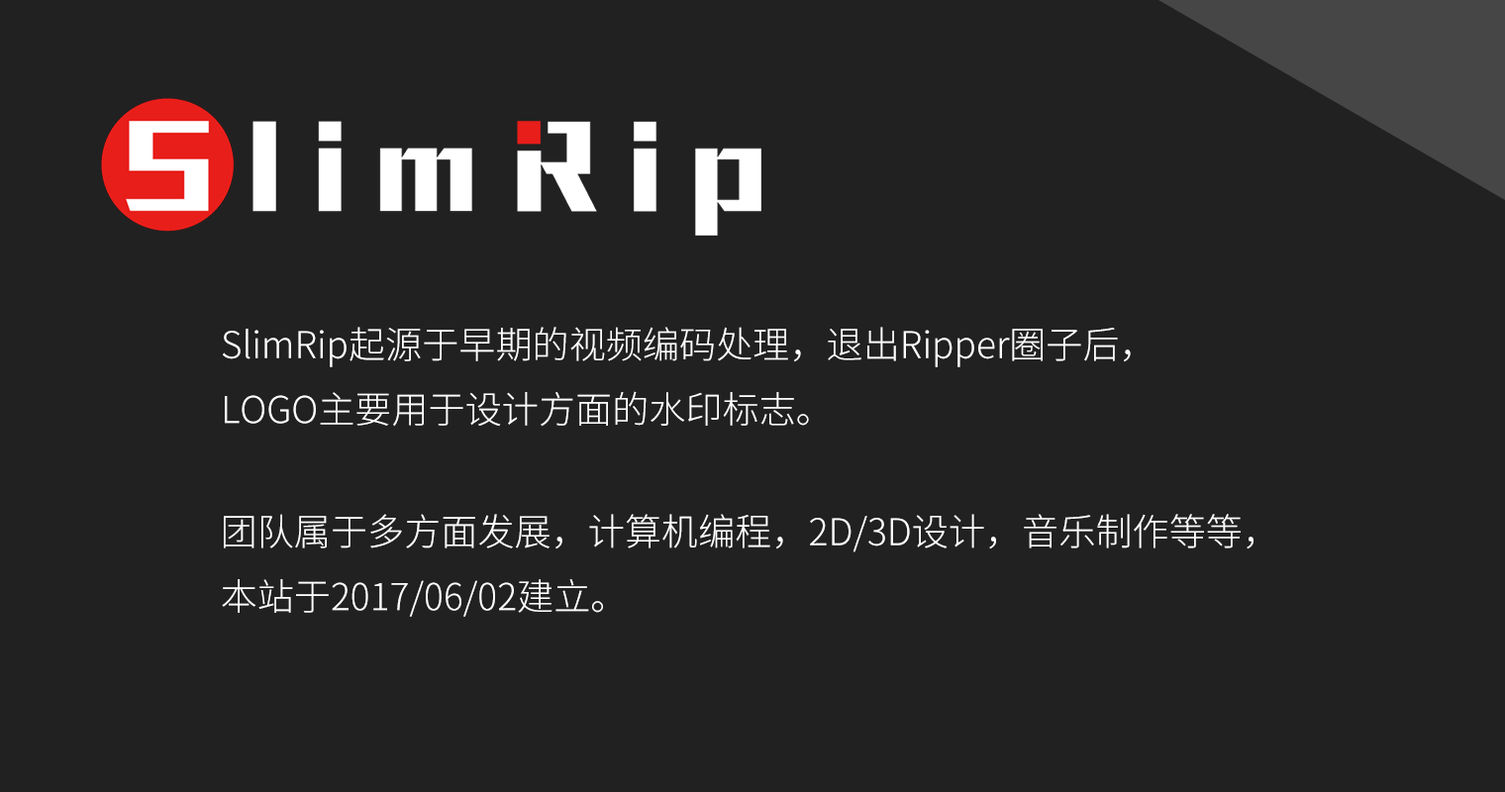
<style>
.page{position:relative;width:1505px;height:792px;background:#212121}
.page>*{position:absolute;margin:0}
.t1{font:37.1px "SourceHanSansSC-Light";color:#ffffff}
</style>
<div class="page">
<p class="t1" style="left:223px;top:327px;width:908px;height:100px">SlimRip起源于早期的视频编码处理，退出Ripper圈子后，<br>LOGO主要用于设计方面的水印标志。</p>
<p class="t1" style="left:222px;top:514px;width:1032px;height:103px">团队属于多方面发展，计算机编程，2D/3D设计，音乐制作等等，<br>本站于2017/06/02建立。</p>
</div>
